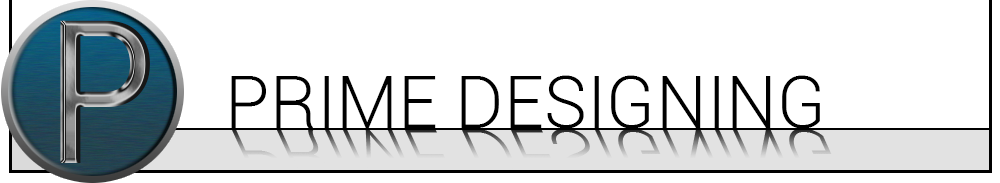
<style>
.page{position:relative;width:1000px;height:183px;background:#ffffff}
.page>*{position:absolute;margin:0}
.t1{font:200px "Roboto-Condensed"}
.t2{font:72px "Roboto-Light";color:#000000}
</style>
<div class="page">
<p class="t1" style="left:60px;top:20px;width:90px;height:143px">P</p>
<p class="t2" style="left:231px;top:75px;width:589px;height:54px">PRIME DESIGNING</p>
</div>
